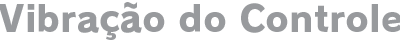
<style>
.page{position:relative;width:400px;height:40px;background:#ffffff}
.page>*{position:absolute;margin:0}
.t1{font:36px "RodinPro-EB";letter-spacing:0.003em;color:#989a9d}
</style>
<div class="page">
<p class="t1" style="left:0px;top:2px;width:402px;height:38px">Vibração do Controle</p>
</div>
